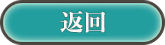
<style>
.page{position:relative;width:165px;height:45px}
.page>*{position:absolute;margin:0}
.t1{font:24px "RyuminPr6N-ExBold";color:#fff7f5}
</style>
<div class="page">
<p class="t1" style="left:60px;top:11px;width:45px;height:22px">返回</p>
</div>
